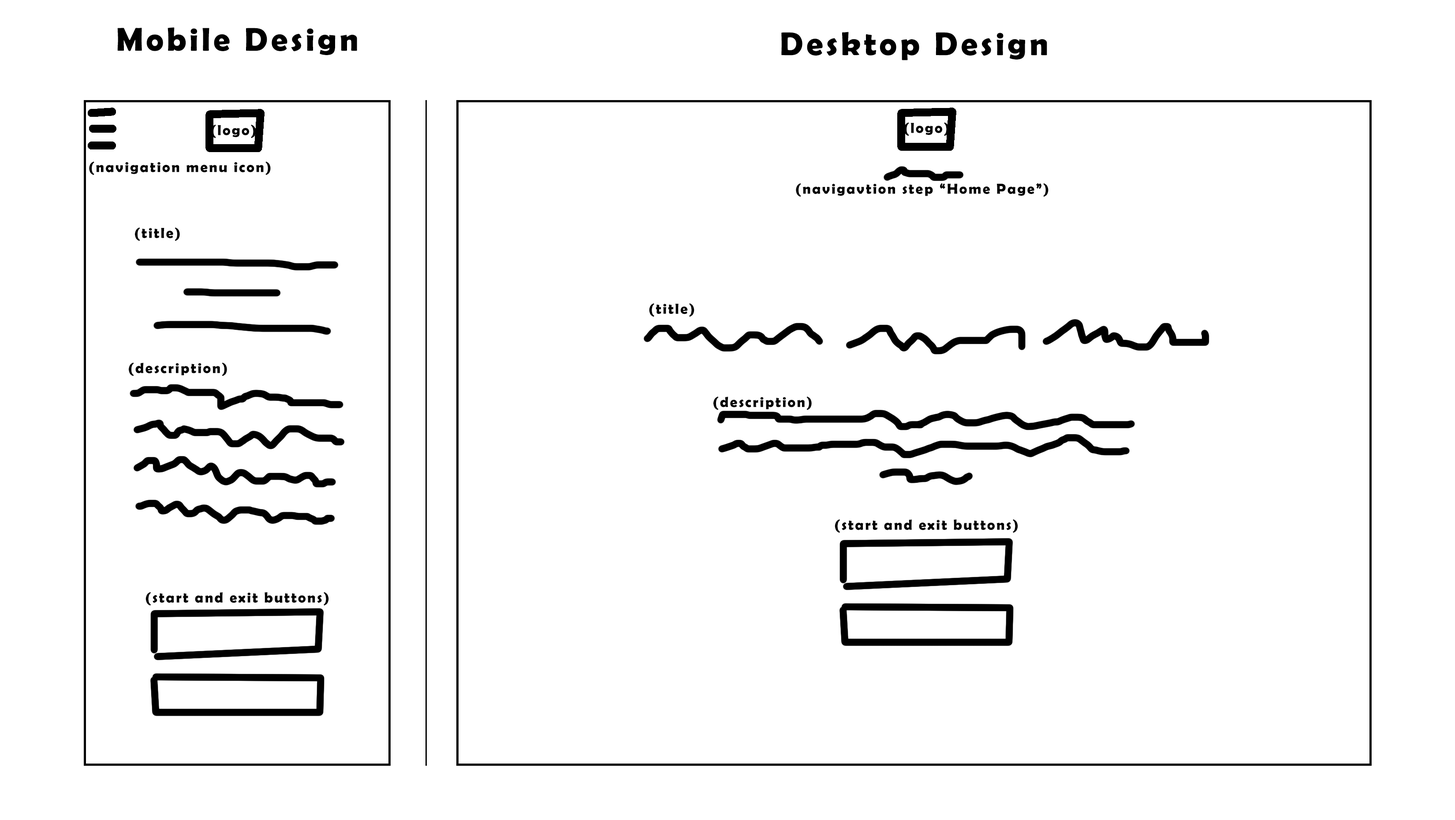
<style>
.page{position:relative;width:1455px;height:820px;background:#ffffff}
.page>*{position:absolute;margin:0}
.t1{font:33.1px "BerlinSansFBDemi-Bold";letter-spacing:0.093em;color:#000000}
.t2{font:14.7px "BerlinSansFBDemi-Bold";letter-spacing:0.093em;color:#000000}
</style>
<div class="page">
<p class="t1" style="left:117px;top:27px;width:240px;height:28px">Mobile Design</p>
<p class="t1" style="left:781px;top:32px;width:266px;height:28px">Desktop Design</p>
<p class="t2" style="left:211px;top:124px;width:45px;height:14px">(logo)</p>
<p class="t2" style="left:904px;top:122px;width:45px;height:14px">(logo)</p>
<p class="t2" style="left:89px;top:161px;width:182px;height:14px">(navigation menu icon)</p>
<p class="t2" style="left:796px;top:183px;width:252px;height:14px">(navigavtion step “Home Page”)</p>
<p class="t2" style="left:135px;top:227px;width:45px;height:14px">(title)</p>
<p class="t2" style="left:649px;top:303px;width:45px;height:14px">(title)</p>
<p class="t2" style="left:129px;top:362px;width:98px;height:14px">(description)</p>
<p class="t2" style="left:713px;top:396px;width:98px;height:14px">(description)</p>
<p class="t2" style="left:834px;top:519px;width:184px;height:14px">(start and exit buttons)</p>
<p class="t2" style="left:145px;top:592px;width:184px;height:14px">(start and exit buttons)</p>
</div>
